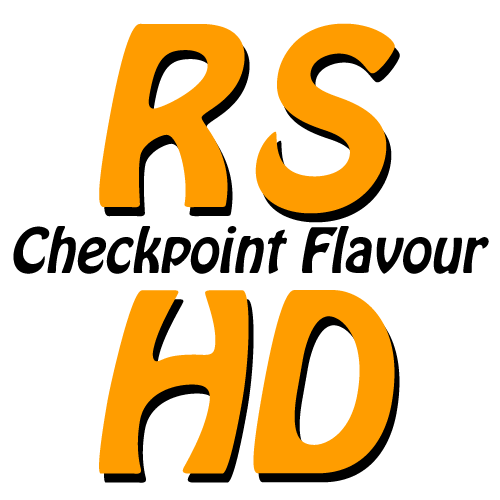
<style>
.page{position:relative;width:500px;height:500px;background:#ffffff}
.page>*{position:absolute;margin:0}
.t1{font:220px "HoboStd";color:#ff9c00;font-style:italic}
.t2{font:55px "HoboStd";color:#000000;font-style:italic}
.t3{font:220px "HoboStd";color:#ff9d00;font-style:italic}
</style>
<div class="page">
<p class="t1" style="left:99px;top:23px;width:146px;height:185px">R</p>
<p class="t1" style="left:255px;top:23px;width:140px;height:191px">S</p>
<p class="t2" style="left:13px;top:226px;width:476px;height:48px">Checkpoint Flavour</p>
<p class="t3" style="left:99px;top:290px;width:150px;height:184px">H</p>
<p class="t3" style="left:253px;top:290px;width:142px;height:184px">D</p>
</div>
